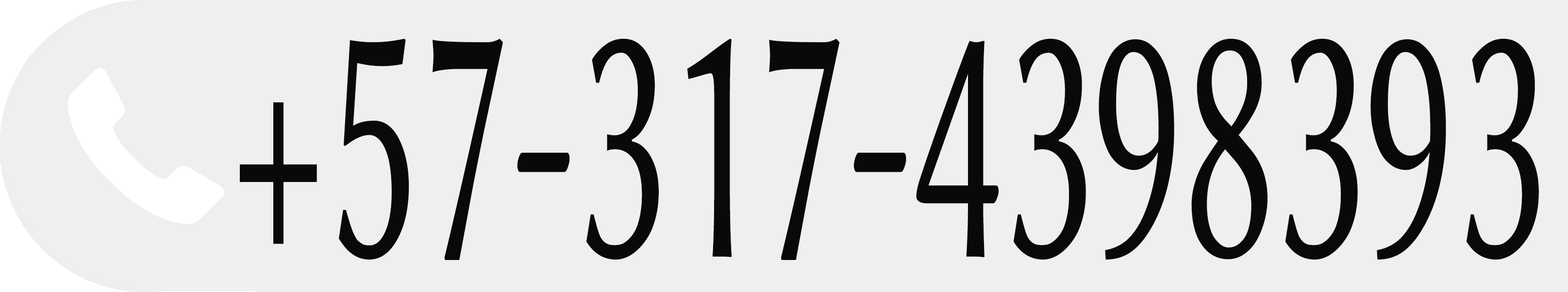
<style>
.page{position:relative;width:1568px;height:292px;background:#efefef}
.page>*{position:absolute;margin:0}
.t1{font:356.5px "LinuxBiolinumG";color:#090909;scale:0.55 1}
</style>
<div class="page">
<p class="t1" style="left:240px;top:38px;width:1299px;height:222px">+57-317-4398393</p>
</div>
